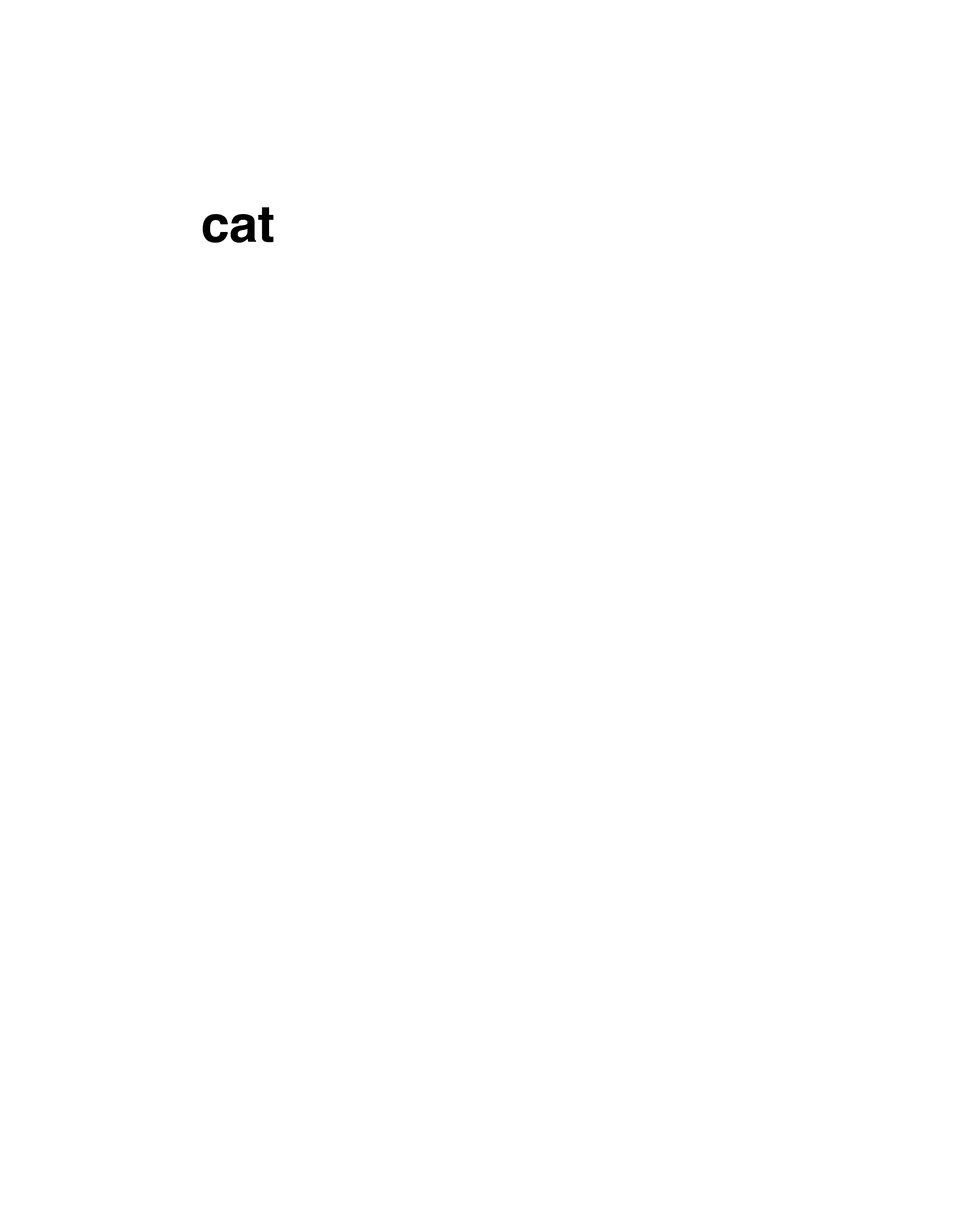
<style>
.page{position:relative;width:977px;height:1221px;background:#ffffff}
.page>*{position:absolute;margin:0}
.t1{font:50.9px "Helvetica-Bold";color:#000000}
</style>
<div class="page">
<p class="t1" style="left:202px;top:207px;width:71px;height:36px">cat</p>
</div>
